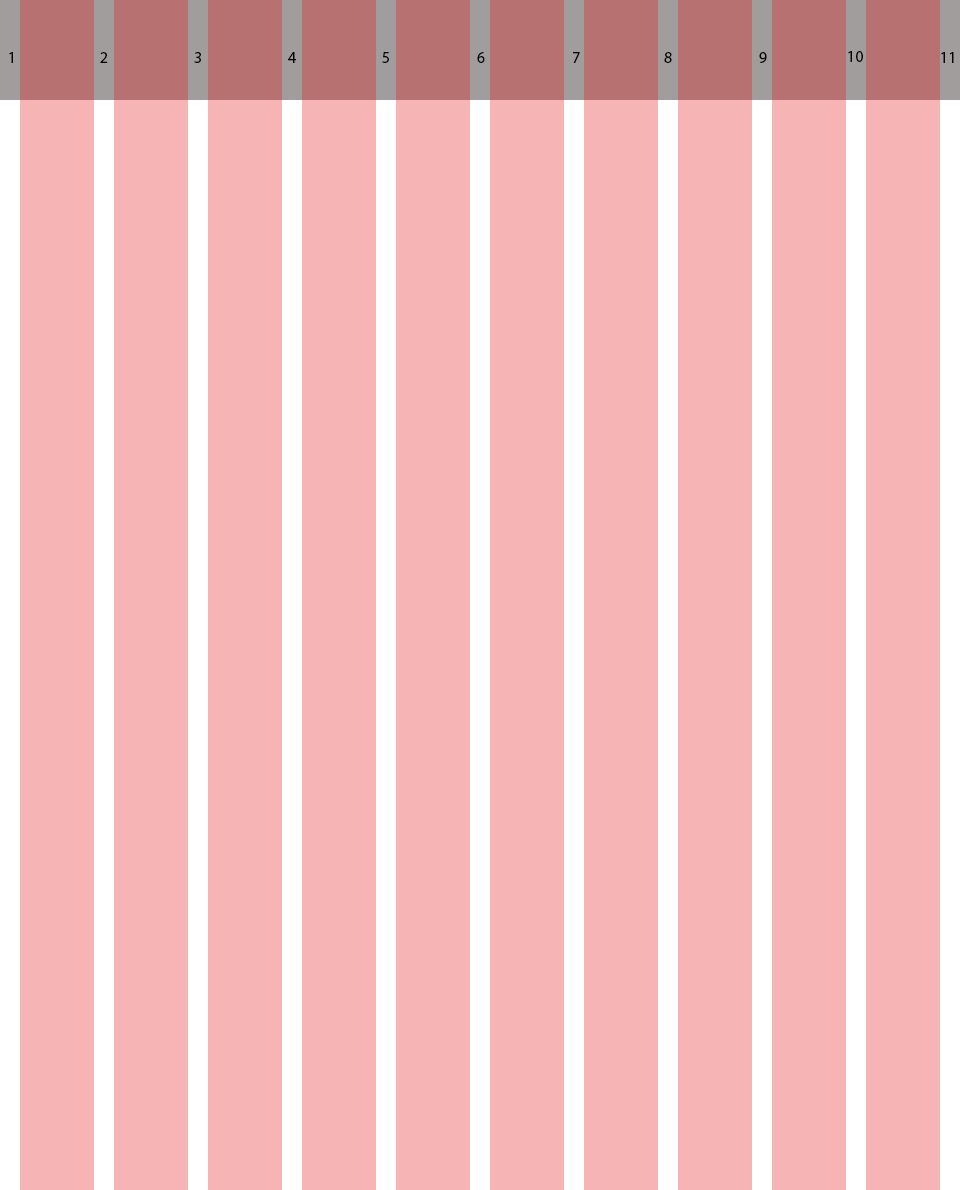
<style>
.page{position:relative;width:960px;height:1190px;background:#f7b4b4}
.page>*{position:absolute;margin:0}
.t1{font:16px "MyriadPro-Regular";color:#010101}
</style>
<div class="page">
<p class="t1" style="left:9px;top:52px;width:4px;height:11px">1</p>
<p class="t1" style="left:100px;top:52px;width:8px;height:11px">2</p>
<p class="t1" style="left:194px;top:52px;width:7px;height:11px">3</p>
<p class="t1" style="left:288px;top:52px;width:8px;height:11px">4</p>
<p class="t1" style="left:382px;top:52px;width:7px;height:11px">5</p>
<p class="t1" style="left:477px;top:52px;width:8px;height:11px">6</p>
<p class="t1" style="left:573px;top:52px;width:7px;height:11px">7</p>
<p class="t1" style="left:664px;top:52px;width:8px;height:11px">8</p>
<p class="t1" style="left:759px;top:52px;width:8px;height:11px">9</p>
<p class="t1" style="left:848px;top:51px;width:15px;height:11px">10</p>
<p class="t1" style="left:941px;top:52px;width:13px;height:11px">11</p>
</div>
